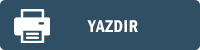
<style>
.page{position:relative;width:200px;height:50px;background:#2f4f64}
.page>*{position:absolute;margin:0}
.t1{font:17.8px "FranklinGothic-DemiCond";letter-spacing:0.04em;color:#ffffff;scale:0.93 1}
</style>
<div class="page">
<p class="t1" style="left:87px;top:20px;width:51px;height:12px">YAZDIR</p>
</div>
